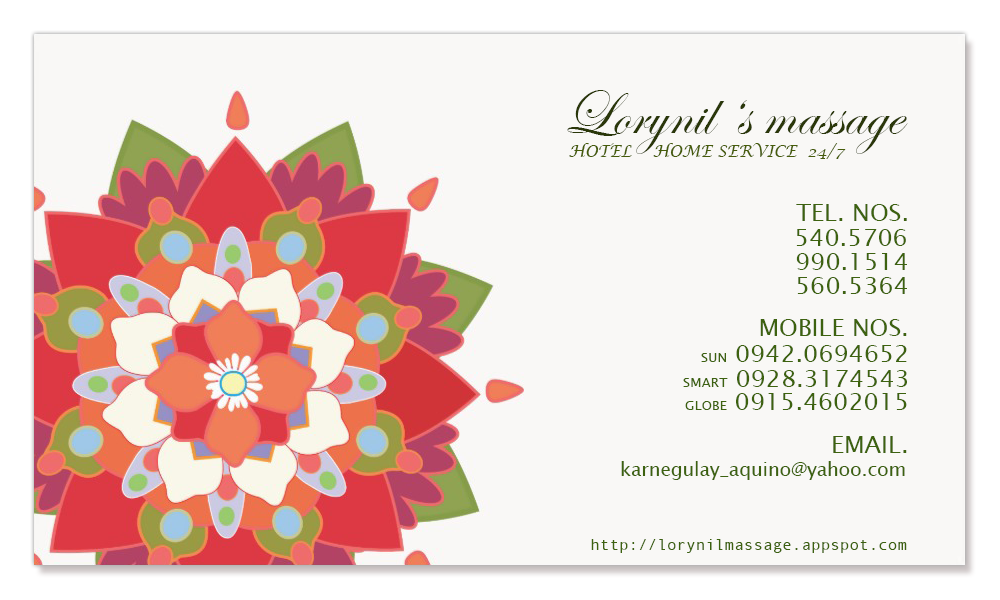
<style>
.page{position:relative;width:1000px;height:600px;background:#f9f8f6}
.page>*{position:absolute;margin:0}
.t1{font:64px "EdwardianScriptITC";color:#2a3709}
.t2{font:16px "LucidaCalligraphy-Italic";color:#465c0a}
.t3{font:24px "LucidaSansUnicode";color:#3d620f}
.t4{font:13.3px "LucidaSansUnicode";color:#3d620f}
.t5{font:18.7px "LucidaSansUnicode";color:#3d620f}
.t6{font:12px "AndaleMono";color:#3d620f}
</style>
<div class="page">
<p class="t1" style="left:567px;top:90px;width:341px;height:64px">Lorynil ‘s massage</p>
<p class="t2" style="left:569px;top:143px;width:277px;height:16px">HOTEL    HOME SERVICE  24/7</p>
<p class="t3" style="left:796px;top:204px;width:111px;height:17px">TEL. NOS.</p>
<p class="t3" style="left:796px;top:229px;width:110px;height:17px">540.5706</p>
<p class="t3" style="left:796px;top:253px;width:111px;height:17px">990.1514</p>
<p class="t3" style="left:797px;top:277px;width:110px;height:17px">560.5364</p>
<p class="t3" style="left:760px;top:319px;width:147px;height:17px">MOBILE NOS.</p>
<p class="t3" style="left:701px;top:345px;width:206px;height:17px"><span class="t4">SUN</span> 0942.0694652</p>
<p class="t3" style="left:683px;top:370px;width:224px;height:17px"><span class="t4">SMART</span> 0928.3174543</p>
<p class="t3" style="left:685px;top:393px;width:222px;height:17px"><span class="t4">GLOBE</span> 0915.4602015</p>
<p class="t3" style="left:833px;top:436px;width:74px;height:17px">EMAIL.</p>
<p class="t5" style="left:621px;top:461px;width:284px;height:19px">karnegulay_aquino@yahoo.com</p>
<p class="t6" style="left:591px;top:539px;width:316px;height:14px">http://lorynilmassage.appspot.com</p>
</div>
